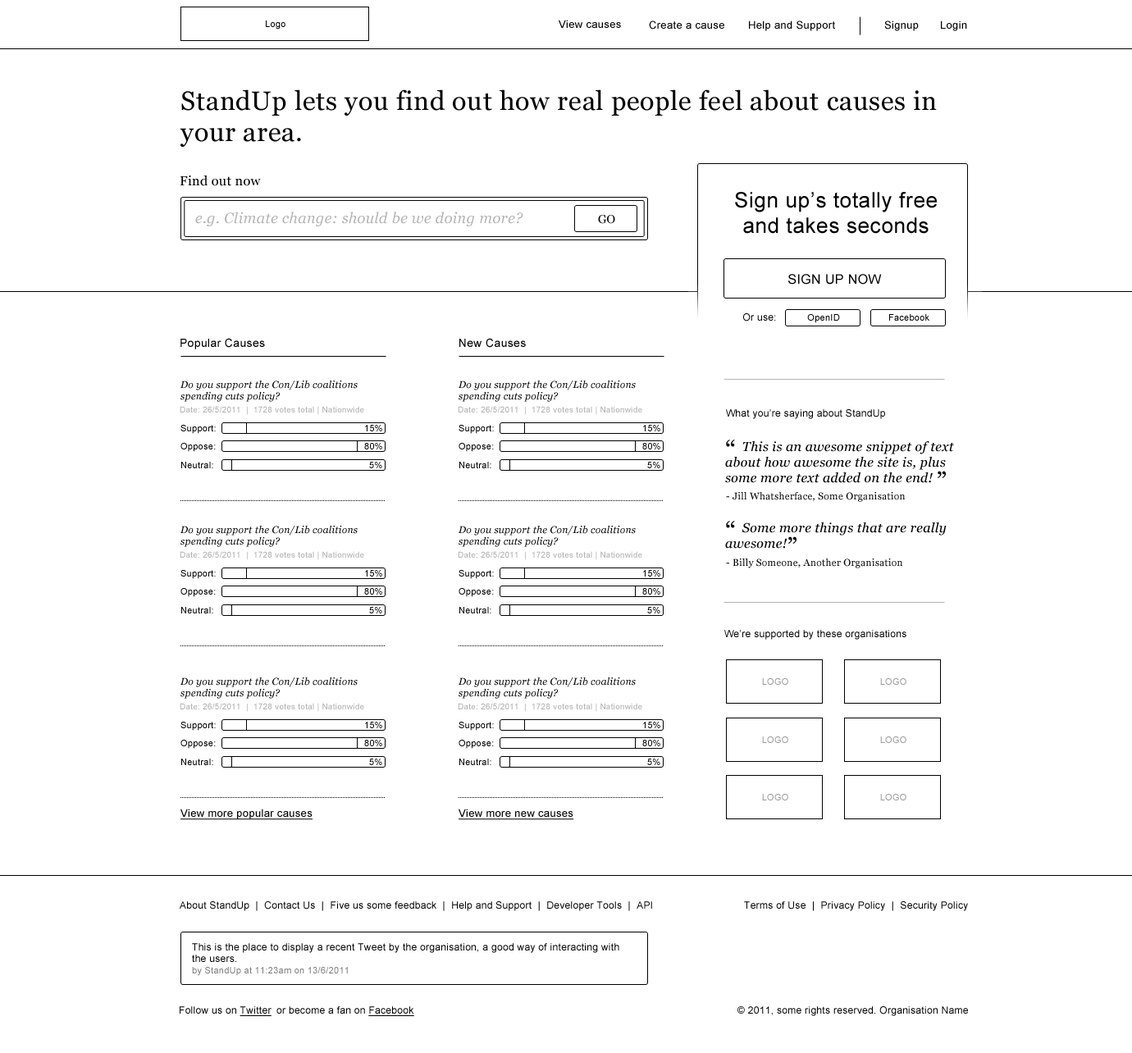
<style>
.page{position:relative;width:1132px;height:1053px;background:#ffffff}
.page>*{position:absolute;margin:0}
.t1{font:9px "ArialMT";letter-spacing:0.025em;color:#000000}
.t2{font:10.7px "ArialMT";letter-spacing:0.025em;color:#000000}
.t3{font:26.3px "Georgia";letter-spacing:0.025em;color:#000000}
.t4{font:13.1px "Georgia";letter-spacing:0.025em;color:#000000}
.t5{font:21.3px "ArialMT";letter-spacing:0.025em;color:#000000}
.t6{font:14.8px "Georgia-Italic";letter-spacing:0.025em;color:#b2b2b2}
.t7{font:11.5px "Georgia";letter-spacing:0.025em;color:#000000}
.t8{font:13.1px "ArialMT";letter-spacing:0.025em;color:#000000}
.t9{font:9.8px "ArialMT";letter-spacing:0.025em;color:#000000}
.t10{font:11.5px "ArialMT";letter-spacing:0.025em;color:#000000}
.t11{font:9.8px "Georgia-Italic";letter-spacing:0.025em;color:#000000}
.t12{font:8.2px "ArialMT";letter-spacing:0.025em;color:#b2b2b2}
.t13{font:13.1px "Georgia-Italic";letter-spacing:0.025em;color:#000000}
.t14{font:26.3px "Georgia";color:#000000}
.t15{font:25.4px/14.8px "Georgia";letter-spacing:0.025em;color:#000000}
.t16{font:9.8px "Georgia";letter-spacing:0.025em;color:#000000}
.t17{font:9px "ArialMT";letter-spacing:0.025em;color:#999999}
.t18{font:10.7px "ArialMT";letter-spacing:0.025em;color:#000000;text-decoration:underline}
.t19{font:9px "ArialMT";letter-spacing:0.025em;color:#7f7e7e}
.t20{font:9.8px "ArialMT";letter-spacing:0.025em;color:#000000;text-decoration:underline}
</style>
<div class="page">
<p class="t1" style="left:266px;top:21px;width:19px;height:9px">Logo</p>
<p class="t2" style="left:559px;top:20px;width:62px;height:8px">View causes</p>
<p class="t2" style="left:649px;top:21px;width:75px;height:9px">Create a cause</p>
<p class="t2" style="left:749px;top:21px;width:86px;height:10px">Help and Support</p>
<p class="t2" style="left:884px;top:21px;width:35px;height:10px">Signup</p>
<p class="t2" style="left:941px;top:21px;width:26px;height:10px">Login</p>
<p class="t3" style="left:180px;top:89px;width:757px;height:58px">StandUp lets you find out how real people feel about causes in<br>your area.</p>
<p class="t4" style="left:180px;top:176px;width:81px;height:10px">Find out now</p>
<p class="t5" style="left:735px;top:192px;width:202px;height:42px;text-align:center">Sign up’s totally free<br>and takes seconds</p>
<p class="t6" style="left:195px;top:212px;width:328px;height:14px">e.g. Climate change: should be we doing more?</p>
<p class="t7" style="left:598px;top:215px;width:17px;height:9px">GO</p>
<p class="t8" style="left:788px;top:274px;width:94px;height:11px">SIGN UP NOW</p>
<p class="t9" style="left:743px;top:313px;width:33px;height:9px">Or use:</p>
<p class="t1" style="left:807px;top:314px;width:33px;height:9px">OpenID</p>
<p class="t1" style="left:889px;top:314px;width:40px;height:7px">Facebook</p>
<p class="t10" style="left:180px;top:338px;width:85px;height:11px">Popular Causes</p>
<p class="t10" style="left:459px;top:338px;width:67px;height:10px">New Causes</p>
<p class="t11" style="left:180px;top:381px;width:178px;height:21px">Do you support the Con/Lib coalitions<br>spending cuts policy?</p>
<p class="t11" style="left:459px;top:381px;width:177px;height:21px">Do you support the Con/Lib coalitions<br>spending cuts policy?</p>
<p class="t12" style="left:180px;top:406px;width:184px;height:9px">Date: 26/5/2011  |  1728 votes total | Nationwide</p>
<p class="t12" style="left:458px;top:406px;width:184px;height:9px">Date: 26/5/2011  |  1728 votes total | Nationwide</p>
<p class="t9" style="left:726px;top:409px;width:159px;height:10px">What you’re saying about StandUp</p>
<p class="t1" style="left:180px;top:425px;width:36px;height:9px">Support:</p>
<p class="t1" style="left:365px;top:425px;width:17px;height:6px">15%</p>
<p class="t1" style="left:459px;top:425px;width:35px;height:9px">Support:</p>
<p class="t1" style="left:643px;top:425px;width:17px;height:6px">15%</p>
<p class="t1" style="left:180px;top:443px;width:36px;height:9px">Oppose:</p>
<p class="t1" style="left:364px;top:443px;width:18px;height:7px">80%</p>
<p class="t1" style="left:459px;top:443px;width:35px;height:9px">Oppose:</p>
<p class="t1" style="left:642px;top:443px;width:18px;height:7px">80%</p>
<p class="t13" style="left:725px;top:440px;width:229px;height:43px"><span class="t14">“ </span>This is an awesome snippet of text<br>about how awesome the site is, plus<br>some more text added on the end! <span class="t15">”</span></p>
<p class="t1" style="left:181px;top:462px;width:32px;height:6px">Neutral:</p>
<p class="t1" style="left:369px;top:462px;width:13px;height:6px">5%</p>
<p class="t1" style="left:459px;top:462px;width:32px;height:6px">Neutral:</p>
<p class="t1" style="left:647px;top:462px;width:13px;height:6px">5%</p>
<p class="t16" style="left:726px;top:492px;width:179px;height:10px">- Jill Whatsherface, Some Organisation</p>
<p class="t13" style="left:725px;top:521px;width:222px;height:28px"><span class="t14">“ </span>Some more things that are really <br>awesome!<span class="t15">”</span></p>
<p class="t11" style="left:180px;top:526px;width:178px;height:21px">Do you support the Con/Lib coalitions<br>spending cuts policy?</p>
<p class="t11" style="left:459px;top:526px;width:177px;height:21px">Do you support the Con/Lib coalitions<br>spending cuts policy?</p>
<p class="t12" style="left:180px;top:551px;width:184px;height:9px">Date: 26/5/2011  |  1728 votes total | Nationwide</p>
<p class="t12" style="left:458px;top:551px;width:184px;height:9px">Date: 26/5/2011  |  1728 votes total | Nationwide</p>
<p class="t16" style="left:726px;top:559px;width:176px;height:9px">- Billy Someone, Another Organisation</p>
<p class="t1" style="left:180px;top:570px;width:36px;height:9px">Support:</p>
<p class="t1" style="left:365px;top:570px;width:17px;height:7px">15%</p>
<p class="t1" style="left:459px;top:570px;width:35px;height:9px">Support:</p>
<p class="t1" style="left:643px;top:570px;width:17px;height:7px">15%</p>
<p class="t1" style="left:180px;top:588px;width:36px;height:9px">Oppose:</p>
<p class="t1" style="left:364px;top:588px;width:18px;height:7px">80%</p>
<p class="t1" style="left:459px;top:588px;width:35px;height:9px">Oppose:</p>
<p class="t1" style="left:642px;top:588px;width:18px;height:7px">80%</p>
<p class="t1" style="left:181px;top:607px;width:32px;height:7px">Neutral:</p>
<p class="t1" style="left:369px;top:607px;width:13px;height:7px">5%</p>
<p class="t1" style="left:459px;top:607px;width:32px;height:7px">Neutral:</p>
<p class="t1" style="left:647px;top:607px;width:13px;height:7px">5%</p>
<p class="t9" style="left:724px;top:630px;width:182px;height:10px">We’re supported by these organisations</p>
<p class="t11" style="left:180px;top:678px;width:178px;height:21px">Do you support the Con/Lib coalitions<br>spending cuts policy?</p>
<p class="t11" style="left:459px;top:678px;width:177px;height:21px">Do you support the Con/Lib coalitions<br>spending cuts policy?</p>
<p class="t17" style="left:762px;top:678px;width:26px;height:7px">LOGO</p>
<p class="t17" style="left:880px;top:678px;width:26px;height:7px">LOGO</p>
<p class="t12" style="left:180px;top:703px;width:184px;height:9px">Date: 26/5/2011  |  1728 votes total | Nationwide</p>
<p class="t12" style="left:458px;top:703px;width:184px;height:9px">Date: 26/5/2011  |  1728 votes total | Nationwide</p>
<p class="t1" style="left:180px;top:722px;width:36px;height:9px">Support:</p>
<p class="t1" style="left:365px;top:722px;width:17px;height:6px">15%</p>
<p class="t1" style="left:459px;top:722px;width:35px;height:9px">Support:</p>
<p class="t1" style="left:643px;top:722px;width:17px;height:6px">15%</p>
<p class="t17" style="left:762px;top:737px;width:26px;height:6px">LOGO</p>
<p class="t17" style="left:880px;top:737px;width:26px;height:6px">LOGO</p>
<p class="t1" style="left:180px;top:740px;width:36px;height:9px">Oppose:</p>
<p class="t1" style="left:364px;top:740px;width:18px;height:7px">80%</p>
<p class="t1" style="left:459px;top:740px;width:35px;height:9px">Oppose:</p>
<p class="t1" style="left:642px;top:740px;width:18px;height:7px">80%</p>
<p class="t1" style="left:181px;top:759px;width:32px;height:6px">Neutral:</p>
<p class="t1" style="left:369px;top:759px;width:13px;height:6px">5%</p>
<p class="t1" style="left:459px;top:759px;width:32px;height:6px">Neutral:</p>
<p class="t1" style="left:647px;top:759px;width:13px;height:6px">5%</p>
<p class="t17" style="left:762px;top:794px;width:26px;height:7px">LOGO</p>
<p class="t17" style="left:880px;top:794px;width:26px;height:7px">LOGO</p>
<p class="t18" style="left:180px;top:809px;width:133px;height:11px">View more popular causes</p>
<p class="t18" style="left:459px;top:809px;width:115px;height:11px">View more new causes</p>
<p class="t9" style="left:180px;top:902px;width:472px;height:9px">About StandUp  |  Contact Us  |  Five us some feedback  |  Help and Support  |  Developer Tools  |  API</p>
<p class="t9" style="left:744px;top:902px;width:224px;height:9px">Terms of Use  |  Privacy Policy  |  Security Policy</p>
<p class="t9" style="left:192px;top:943px;width:427px;height:33px">This is the place to display a recent Tweet by the organisation, a good way of interacting with<br>the users.<br><span class="t19">by StandUp at 11:23am on 13/6/2011</span></p>
<p class="t9" style="left:180px;top:1007px;width:92px;height:9px">Follow us on <span class="t20">Twitter</span></p>
<p class="t9" style="left:276px;top:1007px;width:138px;height:9px">or become a fan on <span class="t20">Facebook</span></p>
<p class="t9" style="left:737px;top:1007px;width:231px;height:9px">© 2011, some rights reserved. Organisation Name</p>
</div>
